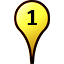
<style>
.page{position:relative;width:64px;height:64px;background:#ffffff}
.page>*{position:absolute;margin:0}
.t1{font:24px "Calibri-Bold";color:#000000}
</style>
<div class="page">
<p class="t1" style="left:27px;top:10px;width:10px;height:15px">1</p>
</div>
